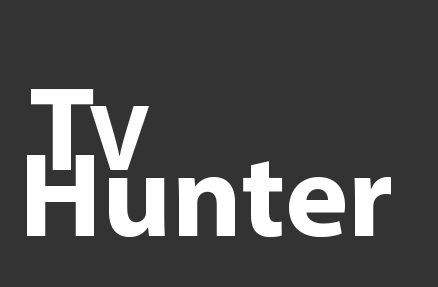
<style>
.page{position:relative;width:438px;height:287px;background:#333333}
.page>*{position:absolute;margin:0}
.t1{font:120px "MyriadPro-Bold";letter-spacing:-0.05em;color:#ffffff}
.t2{font:95px "MyriadPro-Bold";letter-spacing:-0.05em;color:#ffffff}
.t3{font:120px "MyriadPro-Bold";color:#ffffff}
</style>
<div class="page">
<p class="t1" style="left:31px;top:89px;width:118px;height:81px">T<span class="t2">V</span></p>
<p class="t3" style="left:27px;top:155px;width:364px;height:83px">Hunter</p>
</div>
